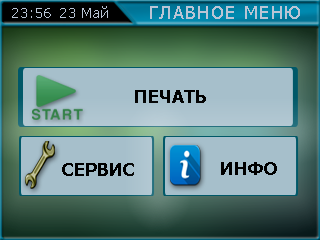
<style>
.page{position:relative;width:320px;height:240px;background:#a6bfcb}
.page>*{position:absolute;margin:0}
.t1{font:14px "Tahoma";letter-spacing:0.075em;color:#bac5d5}
.t2{font:18px "Tahoma";letter-spacing:0.075em;color:#bac5d5}
.t3{font:18px "Tahoma-Bold";color:#000000}
</style>
<div class="page">
<p class="t1" style="left:12px;top:6px;width:96px;height:12px">23:56 23 Май</p>
<p class="t2" style="left:150px;top:6px;width:150px;height:13px">ГЛАВНОЕ МЕНЮ</p>
<p class="t3" style="left:135px;top:90px;width:71px;height:13px">ПЕЧАТЬ</p>
<p class="t3" style="left:62px;top:163px;width:72px;height:13px">СЕРВИС</p>
<p class="t3" style="left:221px;top:162px;width:56px;height:13px">ИНФО</p>
</div>
